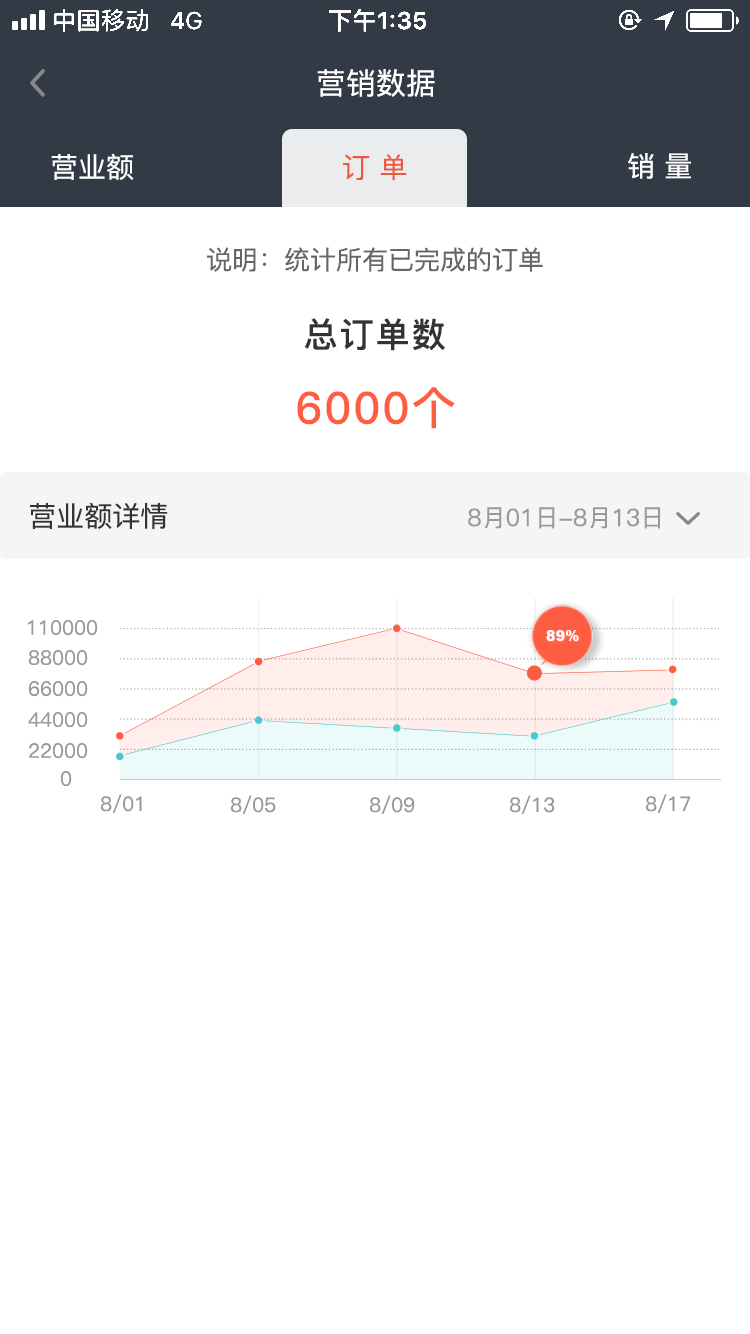
<style>
.page{position:relative;width:750px;height:1334px;background:#ffffff}
.page>*{position:absolute;margin:0}
.t1{font:30px "PingFang-SC-Medium";color:#ffffff}
.t2{font:28px "PingFang-SC-Medium";color:#ffffff}
.t3{font:28px "PingFang-SC-Medium";color:#ec5942}
.t4{font:26px "PingFang-SC-Medium";color:#666666}
.t5{font:34px "PingFang-SC-Bold";letter-spacing:0.06em;color:#333333}
.t6{font:44px "PingFang-SC-Bold";letter-spacing:0.06em;color:#ff5d42}
.t7{font:28px "PingFang-SC-Medium";color:#333333}
.t8{font:24px "PingFang-SC-Medium";color:#999999}
.t9{font:20px "PingFang-SC-Medium";color:#999999}
.t10{font:14.5px "Arial-Black";color:#ffffff}
</style>
<div class="page">
<p class="t1" style="left:317px;top:69px;width:118px;height:28px">营销数据</p>
<p class="t2" style="left:51px;top:153px;width:83px;height:27px">营业额</p>
<p class="t3" style="left:343px;top:154px;width:64px;height:27px">订 单</p>
<p class="t2" style="left:628px;top:153px;width:63px;height:26px">销 量</p>
<p class="t4" style="left:207px;top:247px;width:336px;height:25px">说明：统计所有已完成的订单</p>
<p class="t5" style="left:304px;top:318px;width:141px;height:33px">总订单数</p>
<p class="t6" style="left:297px;top:387px;width:158px;height:42px">6000个</p>
<p class="t7" style="left:30px;top:503px;width:138px;height:26px">营业额详情</p>
<p class="t8" style="left:468px;top:507px;width:192px;height:22px">8月01日-8月13日</p>
<p class="t9" style="left:28px;top:620px;width:70px;height:16px">110000</p>
<p class="t10" style="left:546px;top:630px;width:33px;height:11px">89%</p>
<p class="t9" style="left:28px;top:650px;width:60px;height:16px">88000</p>
<p class="t9" style="left:29px;top:681px;width:59px;height:16px">66000</p>
<p class="t9" style="left:28px;top:712px;width:60px;height:16px">44000</p>
<p class="t9" style="left:29px;top:743px;width:59px;height:16px">22000</p>
<p class="t9" style="left:61px;top:771px;width:11px;height:16px">0</p>
<p class="t9" style="left:100px;top:794px;width:42px;height:19px">8/01</p>
<p class="t9" style="left:230px;top:795px;width:46px;height:19px">8/05</p>
<p class="t9" style="left:369px;top:795px;width:46px;height:19px">8/09</p>
<p class="t9" style="left:509px;top:795px;width:46px;height:19px">8/13</p>
<p class="t9" style="left:645px;top:794px;width:45px;height:19px">8/17</p>
</div>
